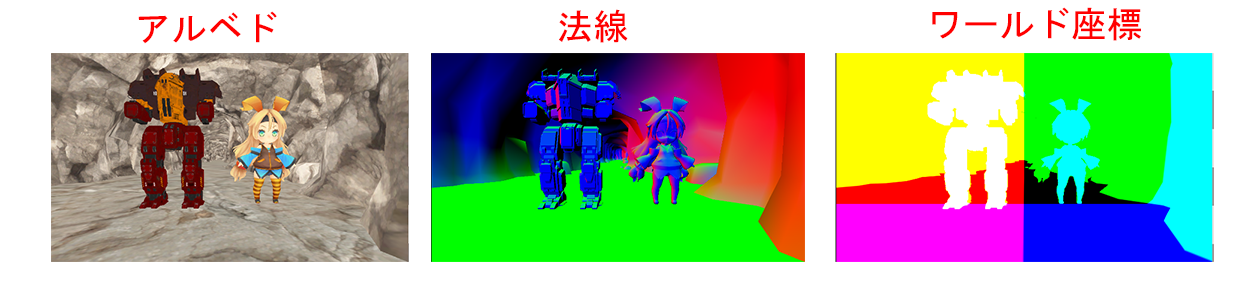
<style>
.page{position:relative;width:1255px;height:301px;background:#ffffff}
.page>*{position:absolute;margin:0}
.t1{font:36px "MS-Gothic";color:#ff0000}
</style>
<div class="page">
<p class="t1" style="left:138px;top:11px;width:139px;height:33px">アルベド</p>
<p class="t1" style="left:559px;top:9px;width:69px;height:34px">法線</p>
<p class="t1" style="left:932px;top:7px;width:209px;height:34px">ワールド座標</p>
</div>
